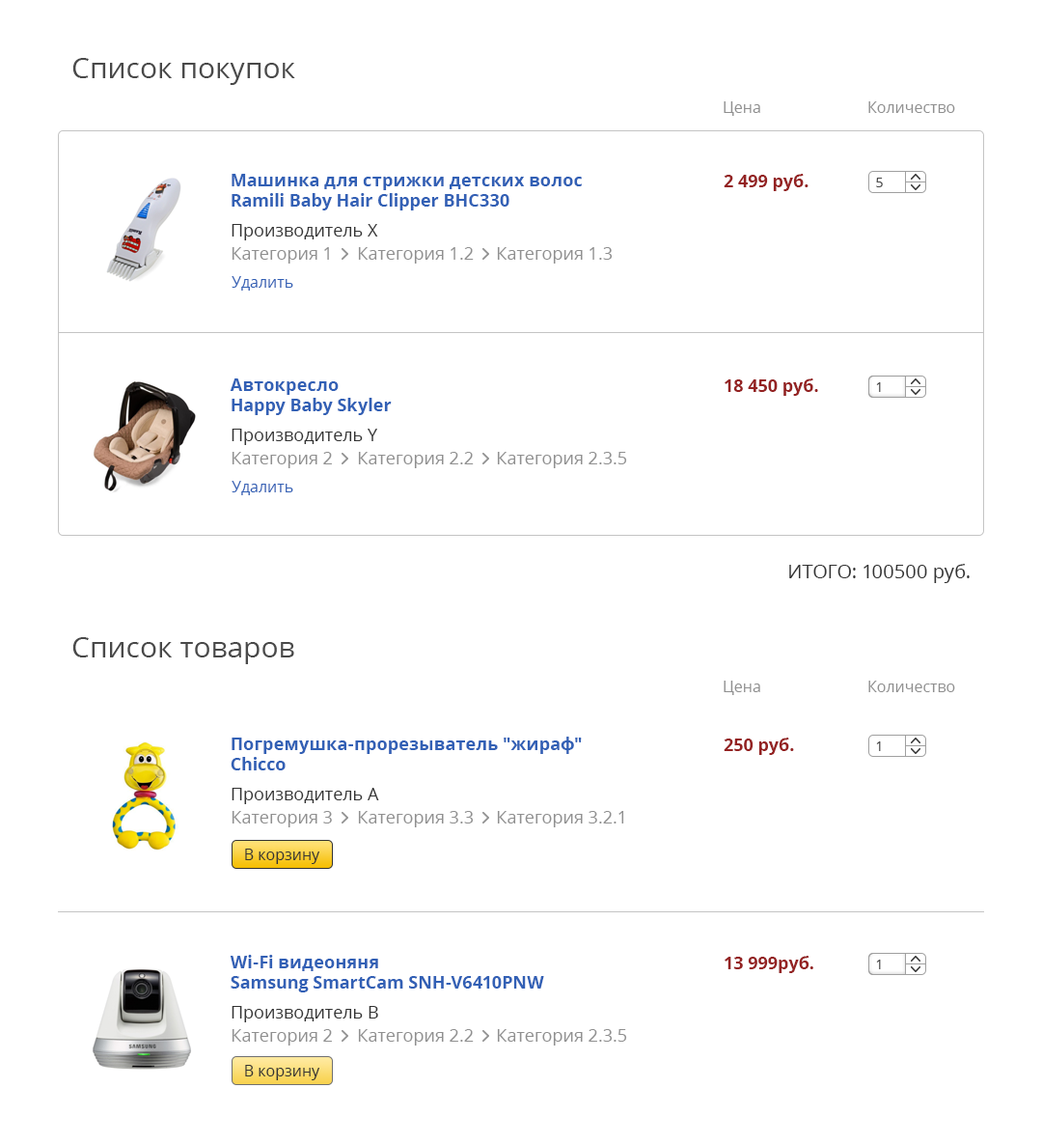
<style>
.page{position:relative;width:1042px;height:1144px;background:#ffffff}
.page>*{position:absolute;margin:0}
.t1{font:29px "OpenSans";color:#494949}
.t2{font:15.4px "OpenSans";color:#909090}
.t3{font:17.4px/20.3px "OpenSans-Bold";color:#3260b5}
.t4{font:17.4px "OpenSans-Bold";color:#942222}
.t5{font:13.5px "OpenSans";color:#494949}
.t6{font:17.4px "OpenSans";color:#333333}
.t7{font:17.4px "OpenSans";color:#909090}
.t8{font:15.4px "OpenSans";color:#3260b5}
.t9{font:19.3px "OpenSans";color:#333333}
.t10{font:15.4px "OpenSans";color:#333333}
</style>
<div class="page">
<p class="t1" style="left:72px;top:58px;width:223px;height:27px">Список покупок</p>
<p class="t2" style="left:724px;top:101px;width:37px;height:15px">Цена</p>
<p class="t2" style="left:869px;top:101px;width:87px;height:12px">Количество</p>
<p class="t3" style="left:232px;top:174px;width:351px;height:36px">Машинка для стрижки детских волос <br>Ramili Baby Hair Clipper BHC330</p>
<p class="t4" style="left:724px;top:174px;width:85px;height:17px">2 499 руб.</p>
<p class="t5" style="left:876px;top:178px;width:7px;height:9px">5</p>
<p class="t6" style="left:232px;top:224px;width:146px;height:16px">Производитель X</p>
<p class="t7" style="left:232px;top:247px;width:97px;height:17px">Категория 1</p>
<p class="t7" style="left:358px;top:247px;width:116px;height:17px">Категория 1.2</p>
<p class="t7" style="left:497px;top:247px;width:116px;height:17px">Категория 1.3</p>
<p class="t8" style="left:232px;top:276px;width:61px;height:15px">Удалить</p>
<p class="t3" style="left:230px;top:378px;width:162px;height:37px">Автокресло <br>Happy Baby Skyler</p>
<p class="t4" style="left:725px;top:378px;width:94px;height:18px">18 450 руб.</p>
<p class="t5" style="left:876px;top:382px;width:5px;height:10px">1</p>
<p class="t6" style="left:232px;top:429px;width:145px;height:16px">Производитель Y</p>
<p class="t7" style="left:232px;top:452px;width:100px;height:16px">Категория 2</p>
<p class="t7" style="left:358px;top:452px;width:116px;height:16px">Категория 2.2</p>
<p class="t7" style="left:497px;top:452px;width:130px;height:16px">Категория 2.3.5</p>
<p class="t8" style="left:232px;top:481px;width:61px;height:14px">Удалить</p>
<p class="t9" style="left:790px;top:564px;width:180px;height:19px">ИТОГО: 100500 руб.</p>
<p class="t1" style="left:72px;top:637px;width:222px;height:27px">Список товаров</p>
<p class="t2" style="left:724px;top:681px;width:37px;height:14px">Цена</p>
<p class="t2" style="left:869px;top:681px;width:87px;height:11px">Количество</p>
<p class="t3" style="left:231px;top:736px;width:351px;height:34px">Погремушка-прорезыватель "жираф" <br>Chicco</p>
<p class="t4" style="left:724px;top:737px;width:70px;height:18px">250 руб.</p>
<p class="t5" style="left:876px;top:741px;width:5px;height:10px">1</p>
<p class="t6" style="left:232px;top:788px;width:147px;height:16px">Производитель A</p>
<p class="t7" style="left:232px;top:811px;width:100px;height:16px">Категория 3</p>
<p class="t7" style="left:358px;top:811px;width:116px;height:16px">Категория 3.3</p>
<p class="t7" style="left:497px;top:811px;width:128px;height:16px">Категория 3.2.1</p>
<p class="t10" style="left:245px;top:848px;width:75px;height:16px">В корзину</p>
<p class="t3" style="left:230px;top:955px;width:314px;height:37px">Wi-Fi видеоняня <br>Samsung SmartCam SNH-V6410PNW</p>
<p class="t4" style="left:725px;top:956px;width:89px;height:17px">13 999руб.</p>
<p class="t5" style="left:876px;top:959px;width:5px;height:10px">1</p>
<p class="t6" style="left:232px;top:1006px;width:146px;height:16px">Производитель B</p>
<p class="t7" style="left:232px;top:1029px;width:100px;height:16px">Категория 2</p>
<p class="t7" style="left:358px;top:1029px;width:116px;height:16px">Категория 2.2</p>
<p class="t7" style="left:497px;top:1029px;width:130px;height:16px">Категория 2.3.5</p>
<p class="t10" style="left:245px;top:1065px;width:75px;height:15px">В корзину</p>
</div>
